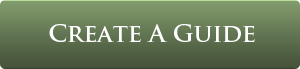
<style>
.page{position:relative;width:300px;height:69px}
.page>*{position:absolute;margin:0}
.t1{font:24px "TrajanPro-Bold";color:#ffffff}
</style>
<div class="page">
<p class="t1" style="left:49px;top:24px;width:206px;height:18px">Create A Guide</p>
</div>
